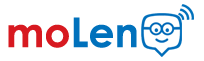
<style>
.page{position:relative;width:204px;height:61px;background:#ffffff}
.page>*{position:absolute;margin:0}
.t1{font:40.8px "CenturyGothic-Bold";color:#0071bc}
.t2{font:40.8px "CenturyGothic-Bold";color:#d71920}
</style>
<div class="page">
<p class="t1" style="left:8px;top:17px;width:129px;height:31px"><span class="t2">mo</span>Len</p>
</div>
